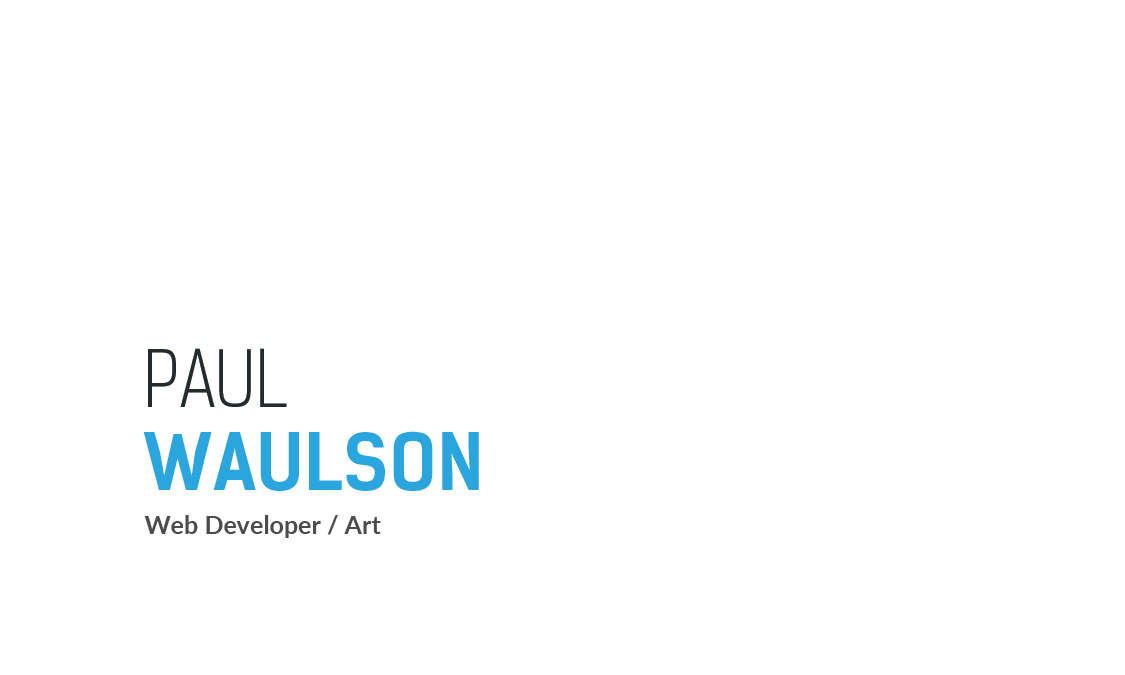
<style>
.page{position:relative;width:1125px;height:675px;background:#ffffff}
.page>*{position:absolute;margin:0}
.t1{font:75px/83.3px "KelsonSans-Bold";color:#2ba5de}
.t2{font:75px/83.3px "KelsonSans-Light";color:#242b2c}
.t3{font:25px "Lato-Bold";color:#4c4c4c}
</style>
<div class="page">
<p class="t1" style="left:143px;top:348px;width:336px;height:143px"><span class="t2">PAUL<br></span>WAULSON</p>
<p class="t3" style="left:144px;top:515px;width:237px;height:23px">Web Developer / Art</p>
</div>
